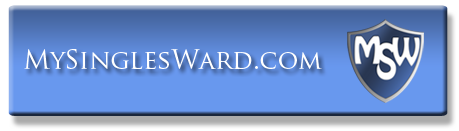
<style>
.page{position:relative;width:459px;height:131px;background:#6898ee}
.page>*{position:absolute;margin:0}
.t1{font:25.6px "TrajanPro-Regular";color:#ffffff;font-variant:small-caps}
</style>
<div class="page">
<p class="t1" style="left:24px;top:49px;width:298px;height:21px">MySinglesWard.com</p>
</div>
